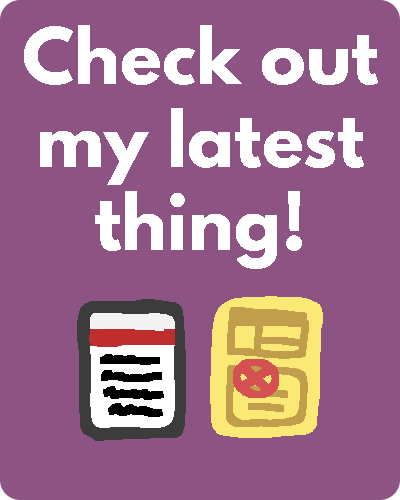
<style>
.page{position:relative;width:400px;height:500px;background:#8c5383}
.page>*{position:absolute;margin:0}
.t1{font:69.4px "LeagueSpartan-Bold";color:#ffffff}
</style>
<div class="page">
<p class="t1" style="left:24px;top:25px;width:354px;height:244px;text-align:center">Check out<br>my latest<br>thing!</p>
</div>
